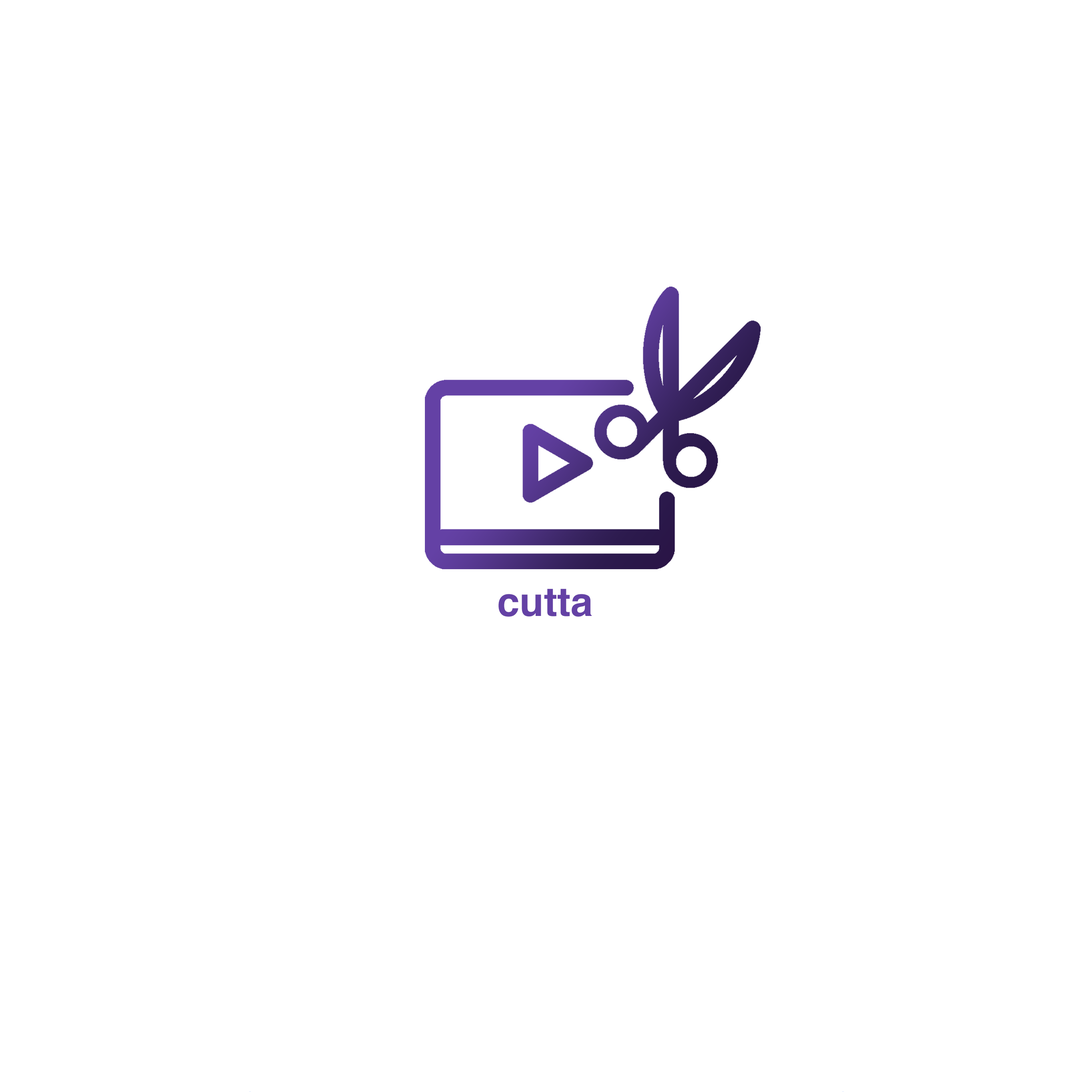
<style>
.page{position:relative;width:1092px;height:1092px;background:#ffffff}
.page>*{position:absolute;margin:0}
.t1{font:40px "Helvetica-Bold";color:#6441a5}
</style>
<div class="page">
<p class="t1" style="left:498px;top:589px;width:94px;height:28px">cutta</p>
</div>
